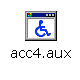
<style>
.page{position:relative;width:80px;height:80px;background:#ffffff}
.page>*{position:absolute;margin:0}
.t1{font:14px "MSReferenceSansSerif";color:#000000}
</style>
<div class="page">
<p class="t1" style="left:11px;top:48px;width:60px;height:10px">acc4.aux</p>
</div>
